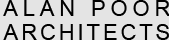
<style>
.page{position:relative;width:169px;height:40px;background:#e4e4e4}
.page>*{position:absolute;margin:0}
.t1{font:22px "ArialMT";letter-spacing:0.22em;color:#000000}
.t2{font:22px "ArialMT";letter-spacing:0.132em;color:#000000}
</style>
<div class="page">
<p class="t1" style="left:3px;top:0px;width:167px;height:16px">ALAN POOR</p>
<p class="t2" style="left:3px;top:24px;width:166px;height:16px">ARCHITECTS</p>
</div>
